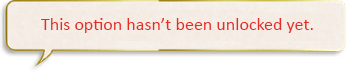
<style>
.page{position:relative;width:346px;height:72px}
.page>*{position:absolute;margin:0}
.t1{font:18px "Calibri";color:#e52e27}
</style>
<div class="page">
<p class="t1" style="left:41px;top:18px;width:272px;height:15px">This option hasn’t been unlocked yet.</p>
</div>
